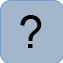
<style>
.page{position:relative;width:63px;height:63px;background:#a3b6cb}
.page>*{position:absolute;margin:0}
.t1{font:45.8px "ArialMT";color:#000000}
</style>
<div class="page">
<p class="t1" style="left:20px;top:15px;width:22px;height:33px">?</p>
</div>
